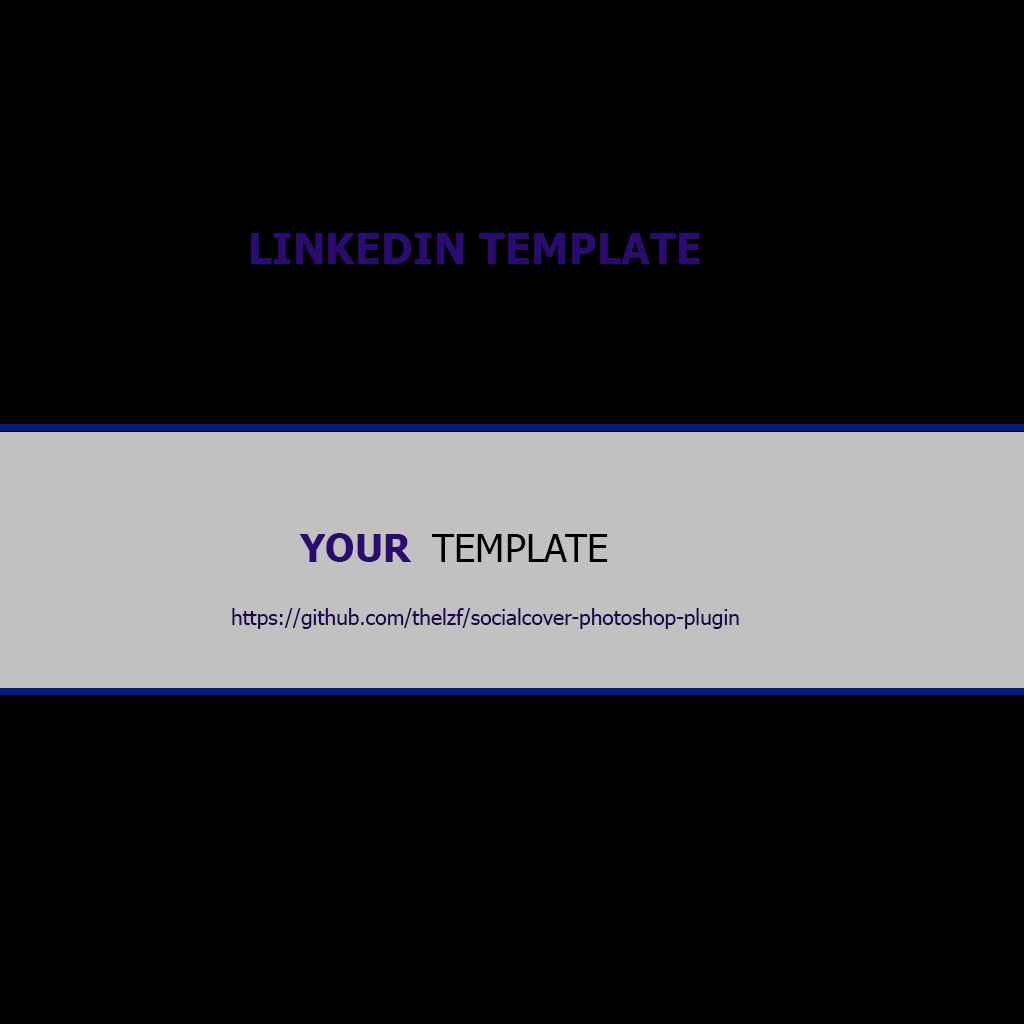
<style>
.page{position:relative;width:1024px;height:1024px;background:#000000}
.page>*{position:absolute;margin:0}
.t1{font:42.1px "Tahoma-Bold";color:#2a0c6e}
.t2{font:38px "Tahoma-Bold";color:#2a0c6e}
.t3{font:38px "Tahoma";color:#000000}
.t4{font:21.1px "Tahoma";color:#1b064d}
</style>
<div class="page">
<p class="t1" style="left:251px;top:233px;width:449px;height:31px">LINKEDIN TEMPLATE</p>
<p class="t2" style="left:299px;top:533px;width:113px;height:29px">YOUR</p>
<p class="t3" style="left:432px;top:534px;width:176px;height:28px">TEMPLATE</p>
<p class="t4" style="left:232px;top:608px;width:507px;height:21px">https://github.com/thelzf/socialcover-photoshop-plugin</p>
</div>
